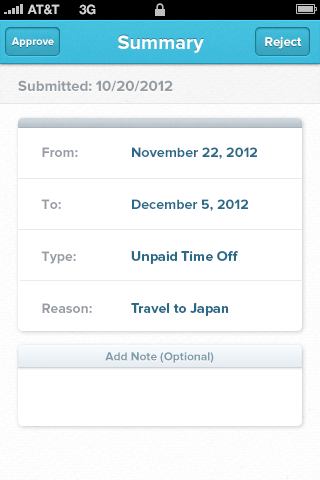
<style>
.page{position:relative;width:320px;height:480px;background:#ffffff}
.page>*{position:absolute;margin:0}
.t1{font:13px "HelveticaNeue-Bold";color:#d4d4d4;text-transform:uppercase}
.t2{font:11px "ProximaNova-Bold";color:#ffffff}
.t3{font:20px "ProximaNova-Bold";color:#ffffff}
.t4{font:13px "ProximaNova-Bold";color:#ffffff}
.t5{font:15px "ProximaNova-Bold";color:#959ca3}
.t6{font:14px/52px "ProximaNova-Bold";color:#959ca3}
.t7{font:14px/52px "ProximaNova-Bold";color:#2a6a88}
.t8{font:12px "ProximaNova-Bold";color:#7f9ba9}
</style>
<div class="page">
<p class="t1" style="left:27px;top:4px;width:33px;height:11px">AT&amp;t</p>
<p class="t1" style="left:79px;top:4px;width:17px;height:11px">3G</p>
<p class="t2" style="left:11px;top:37px;width:43px;height:10px">Approve</p>
<p class="t3" style="left:117px;top:35px;width:87px;height:18px">Summary</p>
<p class="t4" style="left:265px;top:37px;width:37px;height:12px">Reject</p>
<p class="t5" style="left:18px;top:80px;width:155px;height:12px">Submitted: 10/20/2012</p>
<p class="t6" style="left:41px;top:147px;width:51px;height:166px">From:<br>To:<br>Type:<br>Reason:</p>
<p class="t7" style="left:132px;top:147px;width:125px;height:64px">November 22, 2012<br>December 5, 2012</p>
<p class="t7" style="left:131px;top:251px;width:107px;height:65px">Unpaid Time Off<br>Travel to Japan</p>
<p class="t8" style="left:105px;top:352px;width:109px;height:11px">Add Note (Optional)</p>
</div>
